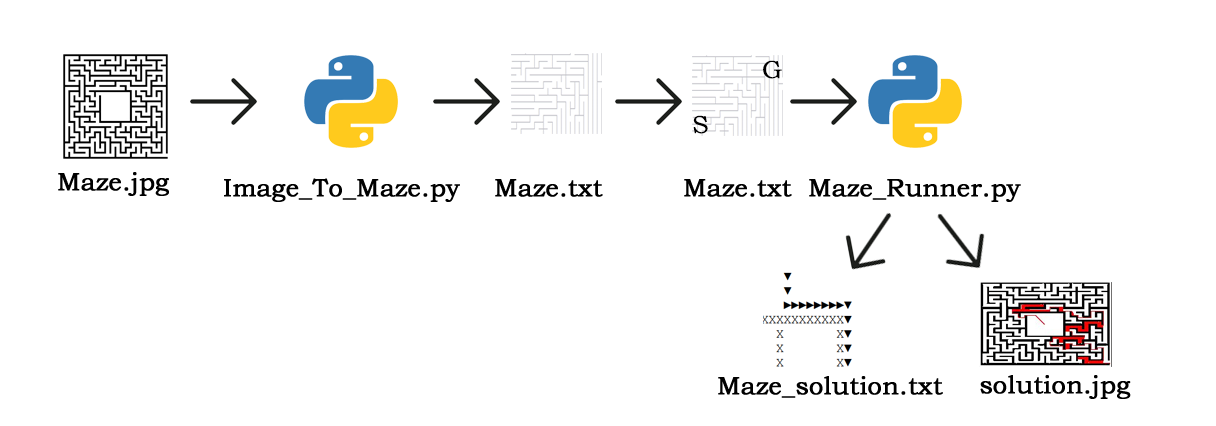
<style>
.page{position:relative;width:1216px;height:426px;background:#ffffff}
.page>*{position:absolute;margin:0}
.t1{font:25px "BookmanOldStyle";color:#000000;font-weight:bold}
</style>
<div class="page">
<p class="t1" style="left:763px;top:60px;width:19px;height:19px">G</p>
<p class="t1" style="left:693px;top:115px;width:15px;height:19px">S</p>
<p class="t1" style="left:58px;top:172px;width:111px;height:24px">Maze.jpg</p>
<p class="t1" style="left:224px;top:178px;width:236px;height:24px">Image_To_Maze.py</p>
<p class="t1" style="left:495px;top:179px;width:108px;height:18px">Maze.txt</p>
<p class="t1" style="left:684px;top:179px;width:108px;height:18px">Maze.txt</p>
<p class="t1" style="left:809px;top:179px;width:212px;height:23px">Maze_Runner.py</p>
<p class="t1" style="left:718px;top:376px;width:225px;height:22px">Maze_solution.txt</p>
<p class="t1" style="left:980px;top:375px;width:151px;height:24px">solution.jpg</p>
</div>
